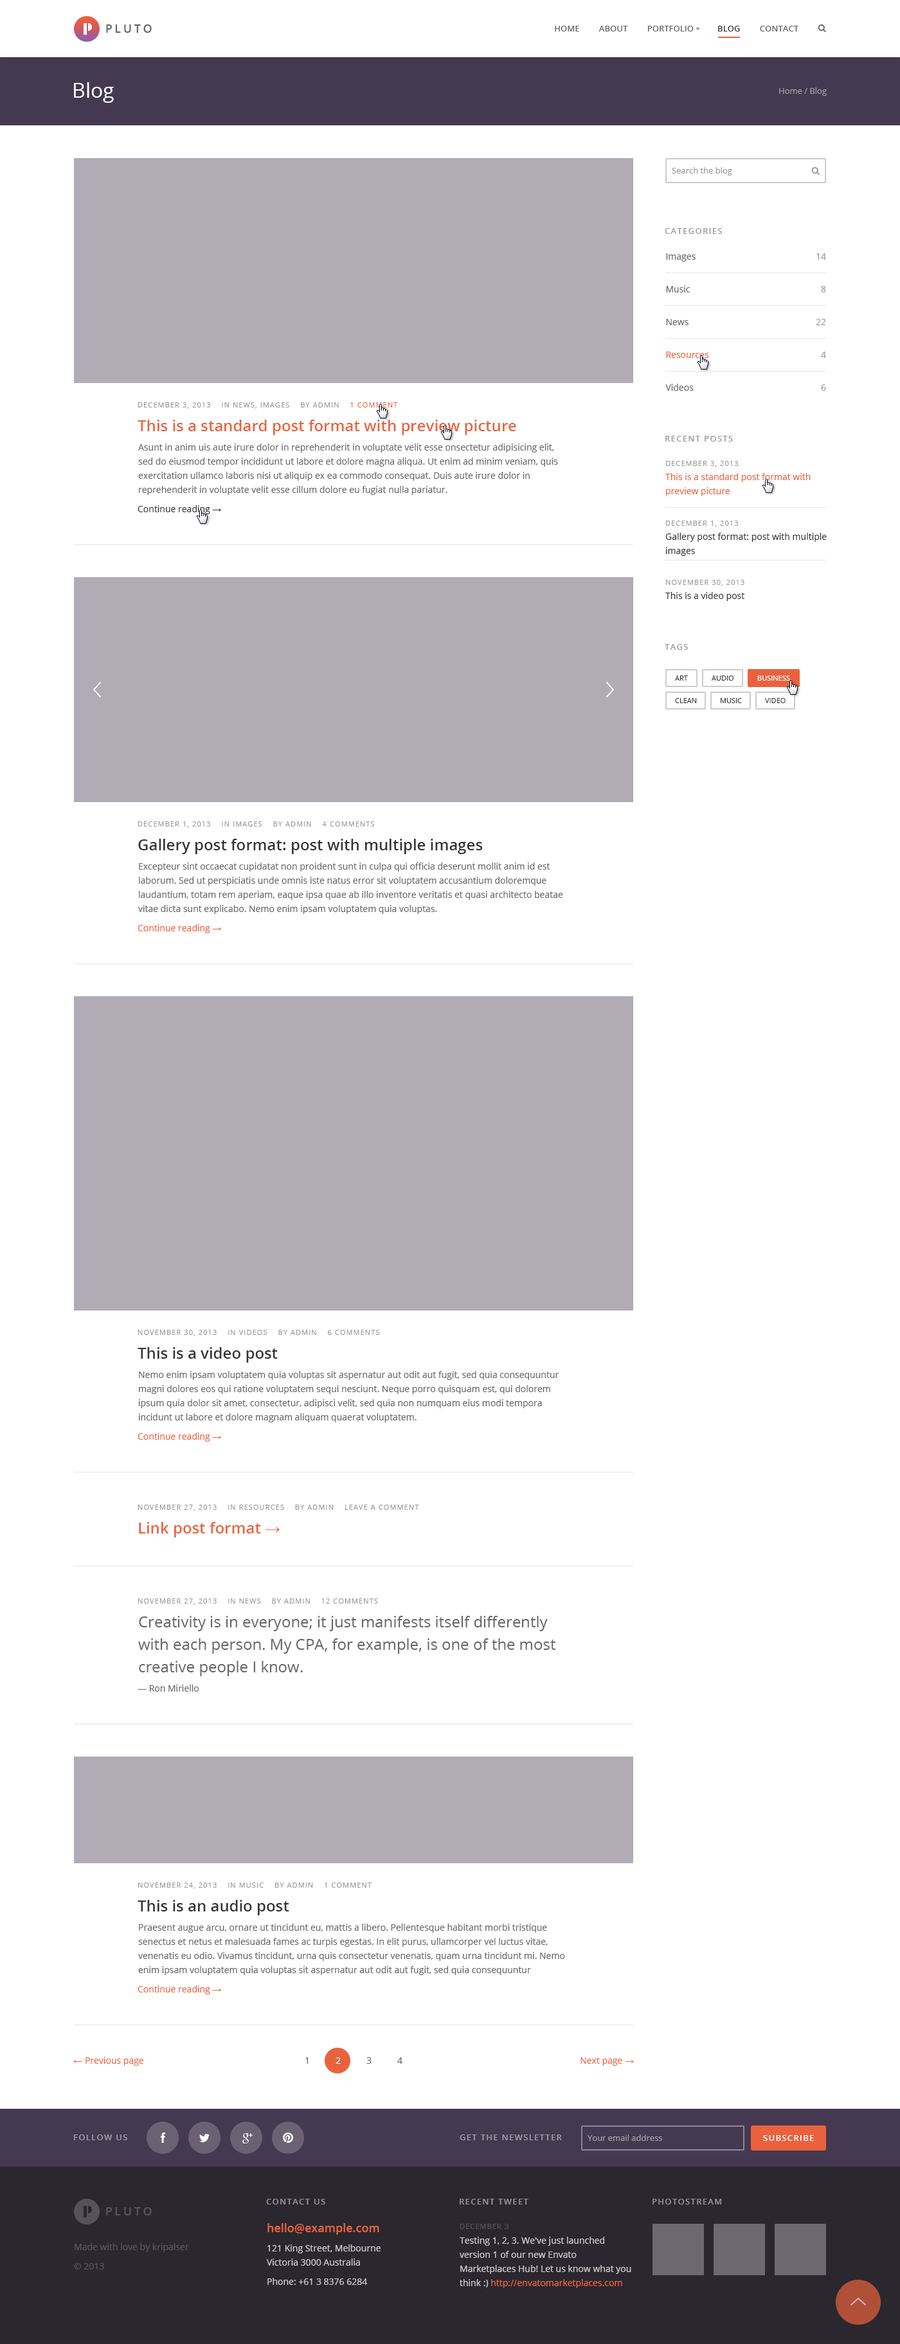
<style>
.page{position:relative;width:900px;height:2344px;background:#ffffff}
.page>*{position:absolute;margin:0}
.t1{font:11.6px "OpenSans-Semibold";letter-spacing:0.2em;color:#666666;text-transform:uppercase}
.t2{font:8.4px "OpenSans-Semibold";color:#666666;text-transform:uppercase}
.t3{font:8.4px "OpenSans-Semibold";color:#333333;text-transform:uppercase}
.t4{font:20.6px "OpenSans";color:#ffffff}
.t5{font:8.4px "OpenSans";color:#a09ca4}
.t6{font:8.4px "OpenSans";color:#999999}
.t7{font:8.4px "OpenSans-Semibold";letter-spacing:0.1em;color:#999999;text-transform:uppercase}
.t8{font:9px/32.8px "OpenSans";color:#666666}
.t9{font:9px/32.8px "OpenSans";color:#ea623d}
.t10{font:9px/32.8px "OpenSans";color:#999999}
.t11{font:7.1px "OpenSans";letter-spacing:0.1em;color:#999999;text-transform:uppercase}
.t12{font:7.1px "OpenSans";letter-spacing:0.1em;color:#ea623d;text-transform:uppercase}
.t13{font:15.4px "OpenSans-Semibold";color:#ea623d}
.t14{font:9px/14.1px "OpenSans";color:#666666}
.t15{font:9px/14.1px "OpenSans";color:#ea623d}
.t16{font:7.1px/14.1px "OpenSans";letter-spacing:0.1em;color:#999999;text-transform:uppercase}
.t17{font:9px "OpenSans";color:#333333}
.t18{font:9px "ArialMT";color:#333333}
.t19{font:9px/14.1px "OpenSans";color:#333333}
.t20{font:7.1px "OpenSans";color:#333333;text-transform:uppercase}
.t21{font:7.1px "OpenSans";color:#ffffff;text-transform:uppercase}
.t22{font:15.4px "OpenSans-Semibold";color:#333333}
.t23{font:9px "OpenSans";color:#ea623d}
.t24{font:9px "ArialMT";color:#ea623d}
.t25{font:15.4px "ArialMT";color:#ea623d}
.t26{font:15.4px/22.5px "OpenSans";color:#666666}
.t27{font:9px "OpenSans";color:#666666}
.t28{font:9px "OpenSans";color:#ffffff}
.t29{font:8.4px "OpenSans-Semibold";letter-spacing:0.1em;color:#a09ca4;text-transform:uppercase}
.t30{font:8.4px "OpenSans-Semibold";letter-spacing:0.1em;color:#ffffff;text-transform:uppercase}
.t31{font:8.4px "OpenSans-Semibold";letter-spacing:0.1em;color:#979698;text-transform:uppercase}
.t32{font:11.6px "OpenSans-Semibold";letter-spacing:0.2em;color:#555258;text-transform:uppercase}
.t33{font:9px/19.3px "OpenSans";color:#cccccc}
.t34{font:11.6px/15.4px "OpenSans-Semibold";color:#ea623d}
.t35{font:9px/14.1px "OpenSans";color:#cccccc}
.t36{font:7.1px "OpenSans";letter-spacing:0.1em;color:#545158;text-transform:uppercase}
.t37{font:9px/14.8px "OpenSans";color:#cccccc}
.t38{font:9px/19.3px "OpenSans";color:#555258}
</style>
<div class="page">
<p class="t1" style="left:106px;top:24px;width:46px;height:9px">Pluto</p>
<p class="t2" style="left:555px;top:26px;width:243px;height:6px">Home         About         Portfolio           <span class="t3">Blog         </span>Contact</p>
<p class="t4" style="left:74px;top:82px;width:40px;height:21px">Blog</p>
<p class="t5" style="left:779px;top:87px;width:48px;height:9px">Home / Blog</p>
<p class="t6" style="left:672px;top:167px;width:60px;height:9px">Search the blog</p>
<p class="t7" style="left:665px;top:228px;width:57px;height:6px">Categories</p>
<p class="t8" style="left:665px;top:253px;width:44px;height:138px">Images<br>Music<br>News<br><span class="t9">Resources<br></span>Videos</p>
<p class="t10" style="left:816px;top:253px;width:10px;height:138px;text-align:right">14<br>8<br>22<br>4<br>6</p>
<p class="t11" style="left:138px;top:402px;width:260px;height:7px">December 3, 2013    in News, Images    by admin    <span class="t12">1 comment</span></p>
<p class="t13" style="left:138px;top:420px;width:378px;height:15px">This is a standard post format with preview picture</p>
<p class="t7" style="left:665px;top:436px;width:68px;height:6px">Recent posts</p>
<p class="t14" style="left:138px;top:444px;width:420px;height:51px">Asunt in anim uis aute irure dolor in reprehenderit in voluptate velit esse onsectetur adipisicing elit, sed do eiusmod tempor incididunt ut labore et dolore magna aliqua. Ut enim ad minim veniam, quis exercitation ullamco laboris nisi ut aliquip ex ea commodo consequat. Duis aute irure dolor in reprehenderit in voluptate velit esse cillum dolore eu fugiat nulla pariatur.</p>
<p class="t15" style="left:665px;top:461px;width:146px;height:35px"><span class="t16">December 3, 2013<br></span>This is a standard post format with preview picture</p>
<p class="t17" style="left:138px;top:505px;width:83px;height:9px">Continue reading <span class="t18">→</span></p>
<p class="t19" style="left:665px;top:521px;width:162px;height:35px"><span class="t16">December 1, 2013<br></span>Gallery post format: post with multiple images</p>
<p class="t19" style="left:665px;top:580px;width:79px;height:21px"><span class="t16">November 30, 2013<br></span>This is a video post</p>
<p class="t7" style="left:665px;top:644px;width:23px;height:6px">Tags</p>
<p class="t20" style="left:675px;top:676px;width:13px;height:5px">art</p>
<p class="t20" style="left:712px;top:676px;width:22px;height:5px">audio</p>
<p class="t21" style="left:757px;top:676px;width:33px;height:5px">business</p>
<p class="t20" style="left:675px;top:698px;width:22px;height:5px">clean</p>
<p class="t20" style="left:721px;top:698px;width:21px;height:5px">music</p>
<p class="t20" style="left:765px;top:698px;width:21px;height:5px">video</p>
<p class="t11" style="left:138px;top:822px;width:237px;height:6px">December 1, 2013    in Images    by admin    4 comments</p>
<p class="t22" style="left:138px;top:839px;width:345px;height:15px">Gallery post format: post with multiple images</p>
<p class="t14" style="left:138px;top:863px;width:425px;height:51px">Excepteur sint occaecat cupidatat non proident sunt in culpa qui officia deserunt mollit anim id est laborum. Sed ut perspiciatis unde omnis iste natus error sit voluptatem accusantium doloremque laudantium, totam rem aperiam, eaque ipsa quae ab illo inventore veritatis et quasi architecto beatae vitae dicta sunt explicabo. Nemo enim ipsam voluptatem quia voluptas.</p>
<p class="t23" style="left:138px;top:924px;width:83px;height:9px">Continue reading <span class="t24">→</span></p>
<p class="t11" style="left:138px;top:1330px;width:242px;height:6px">November 30, 2013    in Videos    by admin    6 comments</p>
<p class="t22" style="left:138px;top:1347px;width:140px;height:16px">This is a video post</p>
<p class="t14" style="left:139px;top:1371px;width:420px;height:52px">Nemo enim ipsam voluptatem quia voluptas sit aspernatur aut odit aut fugit, sed quia consequuntur magni dolores eos qui ratione voluptatem sequi nesciunt. Neque porro quisquam est, qui dolorem ipsum quia dolor sit amet, consectetur, adipisci velit, sed quia non numquam eius modi tempora incidunt ut labore et dolore magnam aliquam quaerat voluptatem.</p>
<p class="t23" style="left:138px;top:1433px;width:83px;height:9px">Continue reading <span class="t24">→</span></p>
<p class="t11" style="left:138px;top:1505px;width:281px;height:6px">November 27, 2013    in Resources    by admin    Leave a comment</p>
<p class="t13" style="left:139px;top:1522px;width:141px;height:16px">Link post format <span class="t25">→</span></p>
<p class="t11" style="left:138px;top:1599px;width:240px;height:6px">November 27, 2013    in News    by admin    12 comments</p>
<p class="t26" style="left:138px;top:1616px;width:418px;height:61px">Creativity is in everyone; it just manifests itself differently with each person. My CPA, for example, is one of the most creative people I know.</p>
<p class="t27" style="left:138px;top:1685px;width:61px;height:7px">— Ron Miriello</p>
<p class="t11" style="left:138px;top:1883px;width:234px;height:6px">November 24, 2013    in Music    by admin    1 comment</p>
<p class="t22" style="left:138px;top:1900px;width:151px;height:16px">This is an audio post</p>
<p class="t14" style="left:138px;top:1924px;width:427px;height:52px">Praesent augue arcu, ornare ut tincidunt eu, mattis a libero. Pellentesque habitant morbi tristique senectus et netus et malesuada fames ac turpis egestas. In elit purus, ullamcorper vel luctus vitae, venenatis eu odio. Vivamus tincidunt, urna quis consectetur venenatis, quam urna tincidunt mi. Nemo enim ipsam voluptatem quia voluptas sit aspernatur aut odit aut fugit, sed quia consequuntur voluptatem sequi nesciunt.</p>
<p class="t23" style="left:138px;top:1986px;width:83px;height:9px">Continue reading <span class="t24">→</span></p>
<p class="t23" style="left:73px;top:2057px;width:70px;height:9px"><span class="t24">← </span>Previous page</p>
<p class="t27" style="left:305px;top:2058px;width:3px;height:6px">1</p>
<p class="t28" style="left:336px;top:2058px;width:5px;height:6px">2</p>
<p class="t27" style="left:366px;top:2058px;width:6px;height:6px">3</p>
<p class="t27" style="left:397px;top:2058px;width:5px;height:6px">4</p>
<p class="t23" style="left:580px;top:2058px;width:54px;height:8px">Next page <span class="t24">→</span></p>
<p class="t29" style="left:74px;top:2135px;width:53px;height:6px">Follow us</p>
<p class="t29" style="left:460px;top:2135px;width:102px;height:6px">Get the newsletter</p>
<p class="t5" style="left:588px;top:2135px;width:74px;height:6px">Your email address</p>
<p class="t30" style="left:763px;top:2136px;width:51px;height:5px">Subscribe</p>
<p class="t31" style="left:266px;top:2199px;width:59px;height:6px">Contact us</p>
<p class="t31" style="left:460px;top:2199px;width:68px;height:6px">Recent tweet</p>
<p class="t31" style="left:652px;top:2199px;width:70px;height:6px">Photostream</p>
<p class="t32" style="left:106px;top:2208px;width:46px;height:8px">Pluto</p>
<p class="t33" style="left:267px;top:2224px;width:114px;height:61px"><span class="t34">hello@example.com<br></span>121 King Street, Melbourne <br><span class="t35">Victoria 3000 Australia<br></span>Phone: +61 3 8376 6284</p>
<p class="t36" style="left:460px;top:2224px;width:49px;height:5px">December 3</p>
<p class="t35" style="left:460px;top:2237px;width:171px;height:52px"><span class="t37">Testing 1, 2, 3. We've just launched </span>version 1 of our new Envato Marketplaces Hub! Let us know what you think :) <span class="t15">http://envatomarketplaces.com</span></p>
<p class="t38" style="left:74px;top:2244px;width:115px;height:26px">Made with love by kripalser<br>© 2013</p>
</div>
